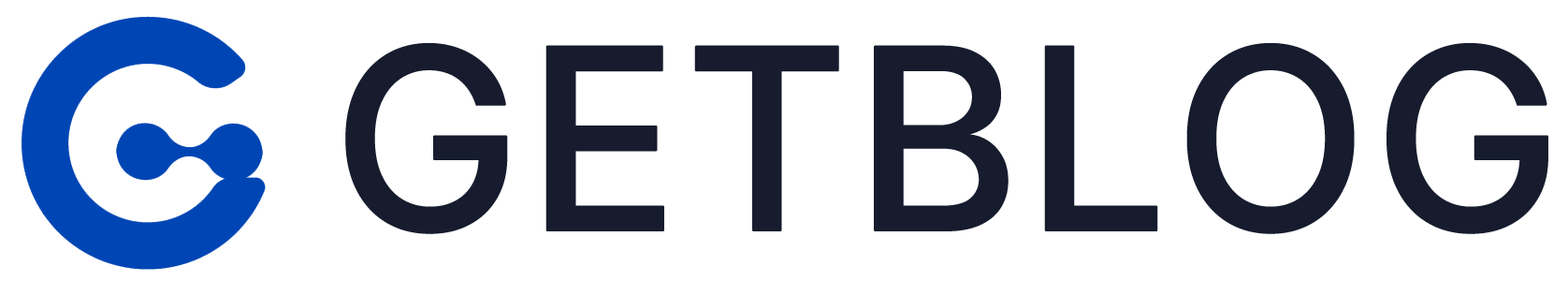
<style>
.page{position:relative;width:1568px;height:281px;background:#ffffff}
.page>*{position:absolute;margin:0}
.t1{font:252.6px "Inter-Medium";letter-spacing:-0.005em;color:#161c2d;font-weight:bold}
</style>
<div class="page">
<p class="t1" style="left:345px;top:43px;width:1203px;height:191px">GETBLOG</p>
</div>
